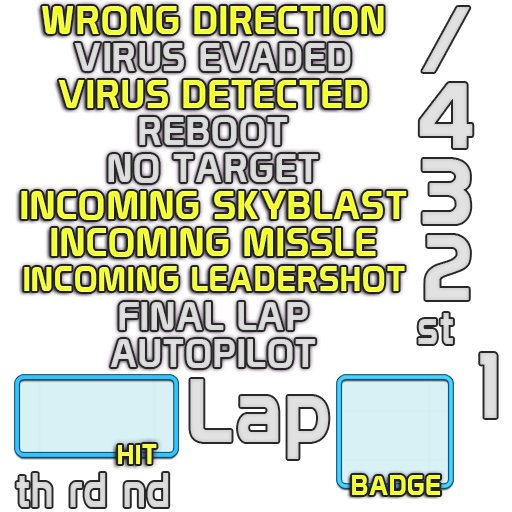
<style>
.page{position:relative;width:512px;height:512px;background:#ffffff}
.page>*{position:absolute;margin:0}
.t1{font:38.5px "Prototype";letter-spacing:0.03em}
.t2{font:38.5px "Prototype";letter-spacing:0.03em;color:#dbdbdb}
.t3{font:33.6px "Prototype";letter-spacing:0.03em}
.t4{font:47.3px "Prototype";letter-spacing:0.03em;color:#d8d8d8;scale:0.87 1}
.t5{font:90px "Prototype";letter-spacing:0.03em;color:#dfdfdf}
.t6{font:27.1px "Prototype";letter-spacing:0.03em}
</style>
<div class="page">
<p class="t1" style="left:42px;top:6px;width:342px;height:29px">WRONG DIRECTION</p>
<p class="t2" style="left:74px;top:43px;width:277px;height:28px">VIRUS EVADED</p>
<p class="t1" style="left:58px;top:80px;width:310px;height:28px">VIRUS DETECTED</p>
<p class="t2" style="left:139px;top:117px;width:149px;height:29px">REBOOT</p>
<p class="t2" style="left:108px;top:154px;width:211px;height:29px">NO TARGET</p>
<p class="t1" style="left:21px;top:191px;width:386px;height:29px">INCOMING SKYBLAST</p>
<p class="t1" style="left:51px;top:228px;width:325px;height:29px">INCOMING MISSLE</p>
<p class="t3" style="left:24px;top:266px;width:381px;height:26px">INCOMING LEADERSHOT</p>
<p class="t2" style="left:119px;top:302px;width:189px;height:28px">FINAL LAP</p>
<p class="t4" style="left:418px;top:313px;width:35px;height:31px">st</p>
<p class="t2" style="left:110px;top:339px;width:206px;height:29px">AUTOPILOT</p>
<p class="t5" style="left:480px;top:353px;width:17px;height:65px">1</p>
<p class="t6" style="left:118px;top:444px;width:39px;height:20px">HIT</p>
<p class="t4" style="left:16px;top:473px;width:36px;height:34px">th</p>
<p class="t6" style="left:352px;top:475px;width:88px;height:20px">BADGE</p>
</div>
